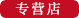
<style>
.page{position:relative;width:79px;height:18px;background:#c30d23}
.page>*{position:absolute;margin:0}
.t1{font:14px "NSimSun";letter-spacing:0.1em;color:#ffffff;font-weight:bold}
</style>
<div class="page">
<p class="t1" style="left:15px;top:2px;width:45px;height:13px">专营店</p>
</div>
